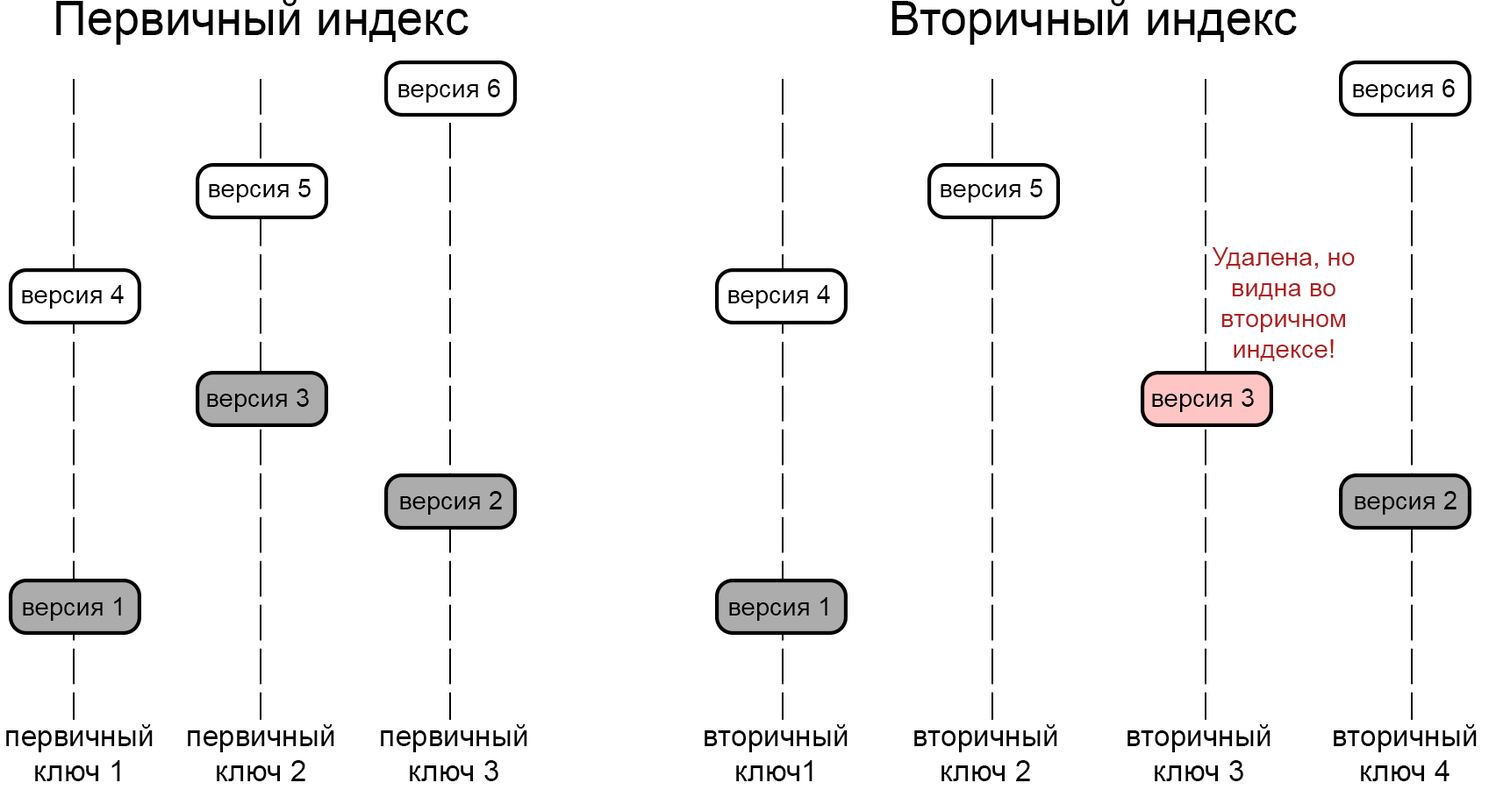
<style>
.page{position:relative;width:1496px;height:797px;background:#ffffff}
.page>*{position:absolute;margin:0}
.t1{font:47.5px "ArialMT";color:#000000}
.t2{font:25.6px "ArialMT";color:#000000}
.t3{font:25.6px "ArialMT";color:#af2121}
.t4{font:29.2px "ArialMT";color:#000000}
</style>
<div class="page">
<p class="t1" style="left:56px;top:0px;width:412px;height:45px">Первичный индекс</p>
<p class="t1" style="left:891px;top:0px;width:405px;height:45px">Вторичный индекс</p>
<p class="t2" style="left:398px;top:79px;width:102px;height:24px">версия 6</p>
<p class="t2" style="left:1353px;top:79px;width:101px;height:24px">версия 6</p>
<p class="t2" style="left:209px;top:179px;width:102px;height:24px">версия 5</p>
<p class="t2" style="left:940px;top:179px;width:102px;height:24px">версия 5</p>
<p class="t3" style="left:1211px;top:247px;width:143px;height:114px;text-align:center">Удалена, но<br>видна во<br>вторичном<br>индексе!</p>
<p class="t2" style="left:22px;top:285px;width:102px;height:24px">версия 4</p>
<p class="t2" style="left:728px;top:285px;width:102px;height:24px">версия 4</p>
<p class="t2" style="left:207px;top:389px;width:102px;height:23px">версия 3</p>
<p class="t2" style="left:1152px;top:389px;width:101px;height:23px">версия 3</p>
<p class="t2" style="left:400px;top:491px;width:102px;height:24px">версия 2</p>
<p class="t2" style="left:1354px;top:491px;width:102px;height:24px">версия 2</p>
<p class="t2" style="left:23px;top:597px;width:98px;height:24px">версия 1</p>
<p class="t2" style="left:729px;top:597px;width:98px;height:24px">версия 1</p>
<p class="t4" style="left:6px;top:725px;width:147px;height:57px;text-align:center">первичный<br>ключ 1</p>
<p class="t4" style="left:188px;top:725px;width:146px;height:57px;text-align:center">первичный<br>ключ 2</p>
<p class="t4" style="left:381px;top:725px;width:146px;height:57px;text-align:center">первичный<br>ключ 3</p>
<p class="t4" style="left:704px;top:725px;width:143px;height:57px;text-align:center">вторичный<br>ключ1</p>
<p class="t4" style="left:914px;top:725px;width:143px;height:57px;text-align:center">вторичный<br>ключ 2</p>
<p class="t4" style="left:1127px;top:725px;width:143px;height:57px;text-align:center">вторичный<br>ключ 3</p>
<p class="t4" style="left:1333px;top:725px;width:143px;height:57px;text-align:center">вторичный<br>ключ 4</p>
</div>
